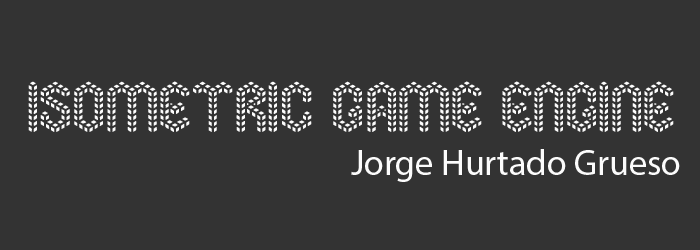
<style>
.page{position:relative;width:700px;height:250px;background:#333333}
.page>*{position:absolute;margin:0}
.t1{font:72px "IsometricLove";color:#fcfcfc}
.t2{font:36px "MyriadPro-Regular";color:#fcfcfc}
</style>
<div class="page">
<p class="t1" style="left:28px;top:81px;width:652px;height:101px">Isometric Game Engine<br><span class="t2">         Jorge Hurtado Grueso</span></p>
</div>
